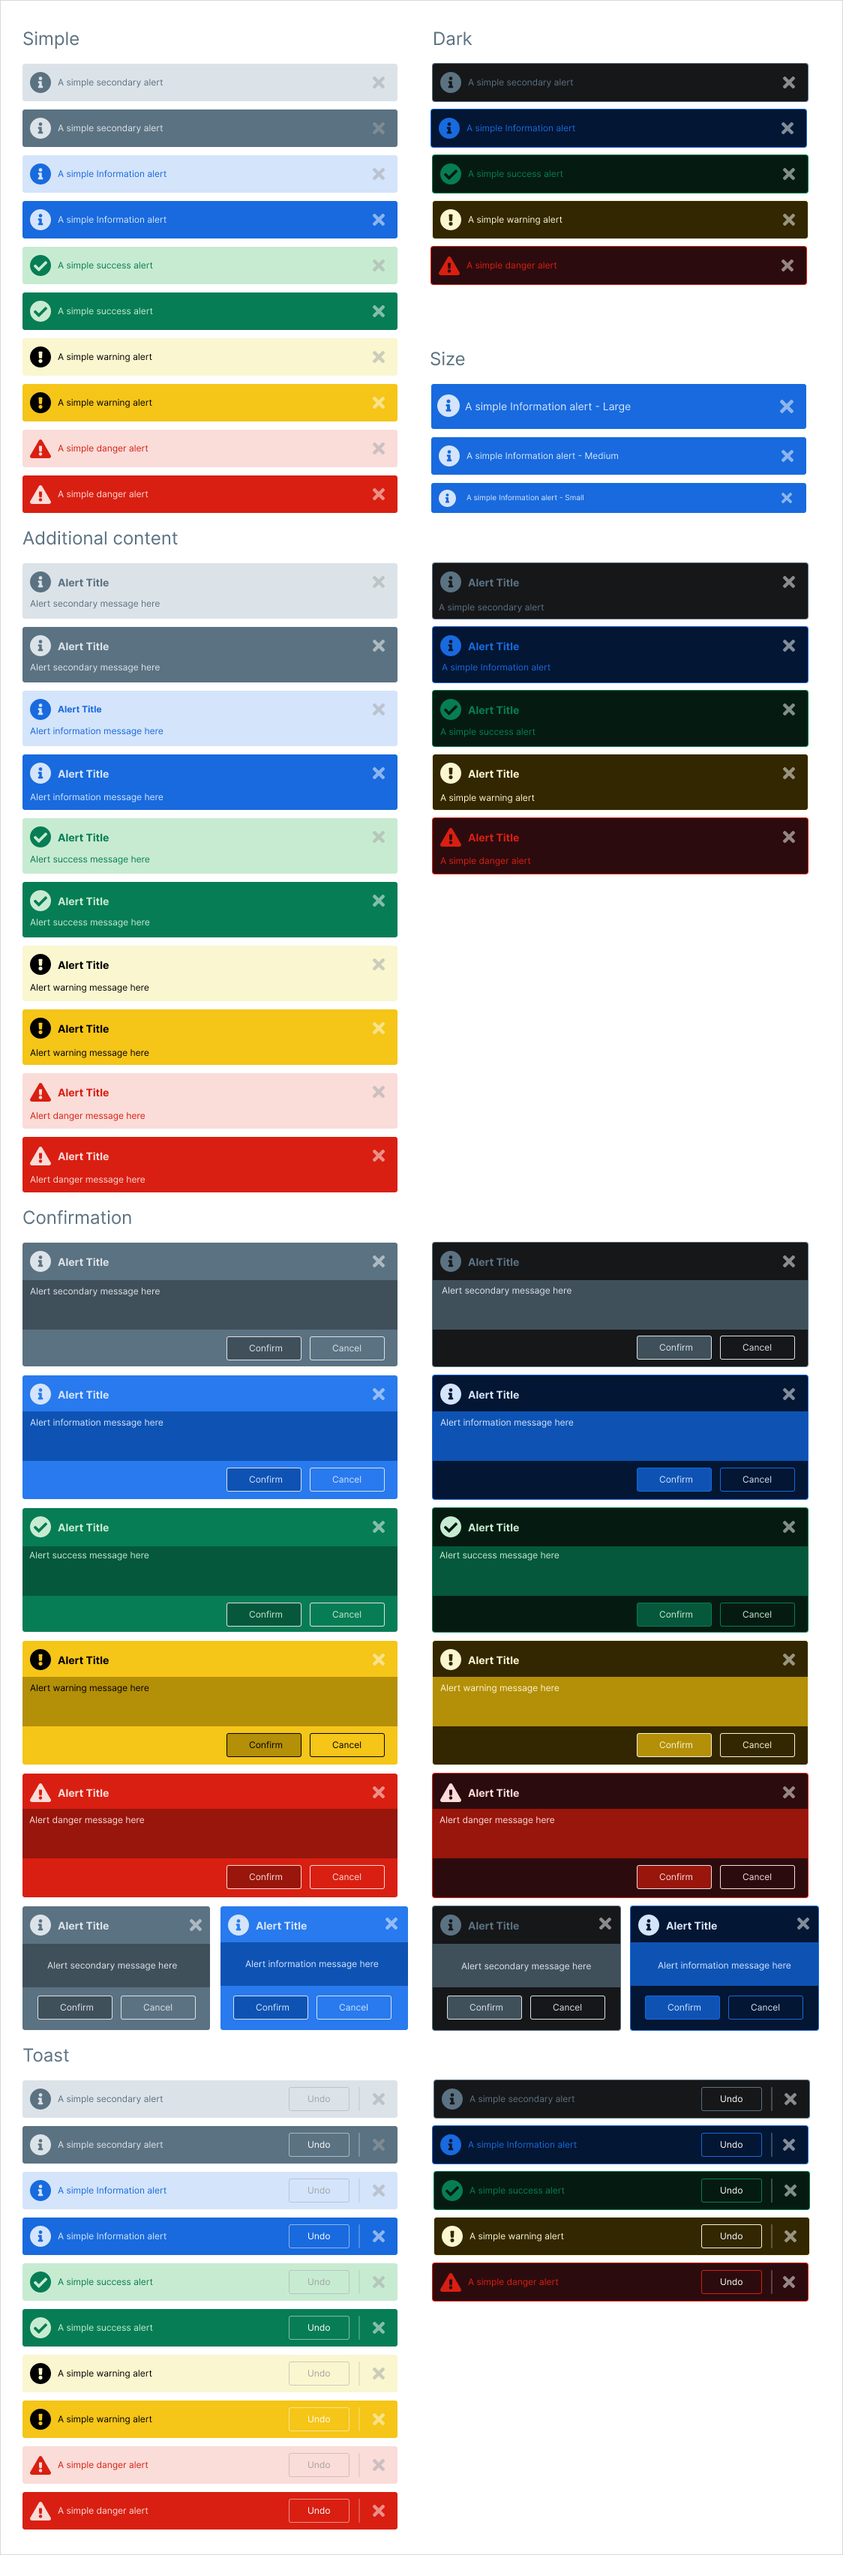
<style>
.page{position:relative;width:843px;height:2555px;background:#ffffff}
.page>*{position:absolute;margin:0}
.t1{font:18px "Inter-Regular";color:#5b7282}
.t2{font:9px "Inter-Regular";color:#5b7282}
.t3{font:9px "Inter-Regular";color:#dce3e8}
.t4{font:9px "Inter-Regular";color:#186ade}
.t5{font:9px "Inter-Regular";color:#077d55}
.t6{font:9px "Inter-Regular";color:#d4e4fa}
.t7{font:9px "Inter-Regular";color:#faf6cf}
.t8{font:9px "Inter-Regular";color:#d91f11}
.t9{font:9px "Inter-Regular";color:#c7ebd1}
.t10{font:9px "Inter-Regular";color:#000000}
.t11{font:10.5px "Inter-Regular";color:#d4e4fa}
.t12{font:9px "Inter-Regular";color:#fadcd9}
.t13{font:7.5px "Inter-Regular";color:#d4e4fa}
.t14{font:10.5px "Inter-Bold";color:#5b7282}
.t15{font:10.5px "Inter-Bold";color:#dce3e8}
.t16{font:10.5px "Inter-Bold";color:#186ade}
.t17{font:9px "Inter-Bold";color:#186ade}
.t18{font:10.5px "Inter-Bold";color:#077d55}
.t19{font:10.5px "Inter-Bold";color:#d4e4fa}
.t20{font:10.5px "Inter-Bold";color:#faf6cf}
.t21{font:10.5px "Inter-Bold";color:#d91f11}
.t22{font:10.5px "Inter-Bold";color:#c7ebd1}
.t23{font:10.5px "Inter-Bold";color:#000000}
.t24{font:10.5px "Inter-Bold";color:#fadcd9}
.t25{font:9px "Inter-Regular";color:#a2a3a5}
.t26{font:9px "Inter-Regular";color:#ffffff}
</style>
<div class="page">
<p class="t1" style="left:23px;top:32px;width:56px;height:17px">Simple</p>
<p class="t1" style="left:434px;top:32px;width:38px;height:14px">Dark</p>
<p class="t2" style="left:58px;top:79px;width:106px;height:9px">A simple secondary alert</p>
<p class="t2" style="left:468px;top:79px;width:106px;height:9px">A simple secondary alert</p>
<p class="t3" style="left:58px;top:124px;width:106px;height:10px">A simple secondary alert</p>
<p class="t4" style="left:466px;top:124px;width:109px;height:10px">A simple Information alert</p>
<p class="t4" style="left:58px;top:170px;width:108px;height:9px">A simple Information alert</p>
<p class="t5" style="left:468px;top:170px;width:95px;height:9px">A simple success alert</p>
<p class="t6" style="left:58px;top:215px;width:108px;height:10px">A simple Information alert</p>
<p class="t7" style="left:468px;top:216px;width:94px;height:9px">A simple warning alert</p>
<p class="t5" style="left:58px;top:262px;width:95px;height:9px">A simple success alert</p>
<p class="t8" style="left:466px;top:262px;width:91px;height:9px">A simple danger alert</p>
<p class="t9" style="left:58px;top:308px;width:95px;height:8px">A simple success alert</p>
<p class="t10" style="left:58px;top:353px;width:94px;height:9px">A simple warning alert</p>
<p class="t1" style="left:430px;top:352px;width:35px;height:14px">Size</p>
<p class="t10" style="left:58px;top:399px;width:94px;height:9px">A simple warning alert</p>
<p class="t11" style="left:465px;top:402px;width:166px;height:11px">A simple Information alert - Large</p>
<p class="t8" style="left:58px;top:445px;width:90px;height:9px">A simple danger alert</p>
<p class="t6" style="left:466px;top:452px;width:152px;height:9px">A simple Information alert - Medium</p>
<p class="t12" style="left:58px;top:490px;width:90px;height:10px">A simple danger alert</p>
<p class="t13" style="left:466px;top:494px;width:118px;height:8px">A simple Information alert - Small</p>
<p class="t1" style="left:22px;top:531px;width:156px;height:14px">Additional content</p>
<p class="t14" style="left:58px;top:578px;width:51px;height:9px">Alert Title</p>
<p class="t14" style="left:468px;top:578px;width:51px;height:9px">Alert Title</p>
<p class="t2" style="left:30px;top:600px;width:130px;height:9px">Alert secondary message here</p>
<p class="t2" style="left:439px;top:604px;width:105px;height:9px">A simple secondary alert</p>
<p class="t15" style="left:58px;top:642px;width:51px;height:9px">Alert Title</p>
<p class="t16" style="left:468px;top:642px;width:51px;height:9px">Alert Title</p>
<p class="t3" style="left:30px;top:664px;width:130px;height:9px">Alert secondary message here</p>
<p class="t4" style="left:442px;top:663px;width:108px;height:10px">A simple Information alert</p>
<p class="t17" style="left:58px;top:705px;width:44px;height:8px">Alert Title</p>
<p class="t18" style="left:468px;top:706px;width:51px;height:9px">Alert Title</p>
<p class="t4" style="left:30px;top:727px;width:134px;height:9px">Alert information message here</p>
<p class="t5" style="left:440px;top:728px;width:96px;height:9px">A simple success alert</p>
<p class="t19" style="left:58px;top:770px;width:51px;height:8px">Alert Title</p>
<p class="t20" style="left:468px;top:770px;width:51px;height:8px">Alert Title</p>
<p class="t6" style="left:30px;top:793px;width:134px;height:9px">Alert information message here</p>
<p class="t7" style="left:440px;top:794px;width:95px;height:9px">A simple warning alert</p>
<p class="t18" style="left:58px;top:833px;width:51px;height:9px">Alert Title</p>
<p class="t21" style="left:468px;top:833px;width:51px;height:9px">Alert Title</p>
<p class="t5" style="left:30px;top:856px;width:120px;height:9px">Alert success message here</p>
<p class="t8" style="left:440px;top:857px;width:91px;height:9px">A simple danger alert</p>
<p class="t22" style="left:58px;top:897px;width:51px;height:9px">Alert Title</p>
<p class="t9" style="left:30px;top:919px;width:120px;height:9px">Alert success message here</p>
<p class="t23" style="left:58px;top:961px;width:51px;height:9px">Alert Title</p>
<p class="t10" style="left:30px;top:984px;width:119px;height:9px">Alert warning message here</p>
<p class="t23" style="left:58px;top:1024px;width:51px;height:10px">Alert Title</p>
<p class="t10" style="left:30px;top:1049px;width:119px;height:9px">Alert warning message here</p>
<p class="t21" style="left:58px;top:1088px;width:51px;height:9px">Alert Title</p>
<p class="t8" style="left:30px;top:1112px;width:116px;height:9px">Alert danger message here</p>
<p class="t24" style="left:58px;top:1152px;width:51px;height:9px">Alert Title</p>
<p class="t12" style="left:30px;top:1176px;width:116px;height:9px">Alert danger message here</p>
<p class="t1" style="left:23px;top:1210px;width:108px;height:15px">Confirmation</p>
<p class="t15" style="left:58px;top:1258px;width:51px;height:9px">Alert Title</p>
<p class="t14" style="left:468px;top:1258px;width:51px;height:9px">Alert Title</p>
<p class="t3" style="left:30px;top:1288px;width:130px;height:9px">Alert secondary message here</p>
<p class="t3" style="left:442px;top:1287px;width:130px;height:9px">Alert secondary message here</p>
<p class="t3" style="left:249px;top:1344px;width:34px;height:8px">Confirm</p>
<p class="t3" style="left:332px;top:1345px;width:30px;height:7px">Cancel</p>
<p class="t3" style="left:659px;top:1343px;width:34px;height:9px">Confirm</p>
<p class="t3" style="left:742px;top:1344px;width:30px;height:8px">Cancel</p>
<p class="t19" style="left:58px;top:1390px;width:51px;height:10px">Alert Title</p>
<p class="t19" style="left:468px;top:1390px;width:51px;height:10px">Alert Title</p>
<p class="t6" style="left:30px;top:1418px;width:134px;height:10px">Alert information message here</p>
<p class="t6" style="left:440px;top:1418px;width:134px;height:10px">Alert information message here</p>
<p class="t6" style="left:249px;top:1475px;width:34px;height:9px">Confirm</p>
<p class="t6" style="left:332px;top:1476px;width:30px;height:8px">Cancel</p>
<p class="t6" style="left:659px;top:1475px;width:34px;height:9px">Confirm</p>
<p class="t6" style="left:742px;top:1476px;width:30px;height:8px">Cancel</p>
<p class="t22" style="left:58px;top:1523px;width:51px;height:9px">Alert Title</p>
<p class="t22" style="left:468px;top:1523px;width:51px;height:9px">Alert Title</p>
<p class="t9" style="left:29px;top:1552px;width:120px;height:9px">Alert success message here</p>
<p class="t9" style="left:440px;top:1552px;width:120px;height:9px">Alert success message here</p>
<p class="t9" style="left:249px;top:1610px;width:34px;height:8px">Confirm</p>
<p class="t9" style="left:332px;top:1611px;width:30px;height:7px">Cancel</p>
<p class="t9" style="left:659px;top:1610px;width:34px;height:8px">Confirm</p>
<p class="t9" style="left:742px;top:1611px;width:30px;height:7px">Cancel</p>
<p class="t23" style="left:58px;top:1656px;width:51px;height:9px">Alert Title</p>
<p class="t20" style="left:468px;top:1656px;width:51px;height:9px">Alert Title</p>
<p class="t10" style="left:30px;top:1684px;width:119px;height:10px">Alert warning message here</p>
<p class="t7" style="left:440px;top:1684px;width:120px;height:10px">Alert warning message here</p>
<p class="t10" style="left:249px;top:1741px;width:34px;height:8px">Confirm</p>
<p class="t10" style="left:332px;top:1742px;width:30px;height:7px">Cancel</p>
<p class="t7" style="left:659px;top:1741px;width:34px;height:8px">Confirm</p>
<p class="t7" style="left:742px;top:1742px;width:30px;height:7px">Cancel</p>
<p class="t24" style="left:58px;top:1789px;width:51px;height:9px">Alert Title</p>
<p class="t24" style="left:468px;top:1789px;width:51px;height:9px">Alert Title</p>
<p class="t12" style="left:29px;top:1816px;width:116px;height:10px">Alert danger message here</p>
<p class="t12" style="left:440px;top:1816px;width:115px;height:10px">Alert danger message here</p>
<p class="t12" style="left:249px;top:1873px;width:34px;height:8px">Confirm</p>
<p class="t12" style="left:332px;top:1874px;width:30px;height:7px">Cancel</p>
<p class="t12" style="left:659px;top:1873px;width:34px;height:8px">Confirm</p>
<p class="t12" style="left:742px;top:1874px;width:30px;height:7px">Cancel</p>
<p class="t15" style="left:58px;top:1922px;width:51px;height:8px">Alert Title</p>
<p class="t19" style="left:256px;top:1922px;width:51px;height:8px">Alert Title</p>
<p class="t14" style="left:468px;top:1922px;width:51px;height:8px">Alert Title</p>
<p class="t19" style="left:666px;top:1922px;width:51px;height:8px">Alert Title</p>
<p class="t6" style="left:245px;top:1960px;width:134px;height:10px">Alert information message here</p>
<p class="t6" style="left:658px;top:1961px;width:133px;height:10px">Alert information message here</p>
<p class="t3" style="left:47px;top:1962px;width:130px;height:9px">Alert secondary message here</p>
<p class="t3" style="left:461px;top:1963px;width:130px;height:9px">Alert secondary message here</p>
<p class="t3" style="left:60px;top:2003px;width:34px;height:9px">Confirm</p>
<p class="t3" style="left:143px;top:2004px;width:29px;height:8px">Cancel</p>
<p class="t6" style="left:256px;top:2003px;width:34px;height:9px">Confirm</p>
<p class="t6" style="left:339px;top:2004px;width:29px;height:8px">Cancel</p>
<p class="t3" style="left:470px;top:2003px;width:33px;height:9px">Confirm</p>
<p class="t3" style="left:553px;top:2004px;width:29px;height:8px">Cancel</p>
<p class="t6" style="left:668px;top:2003px;width:33px;height:9px">Confirm</p>
<p class="t6" style="left:751px;top:2004px;width:29px;height:8px">Cancel</p>
<p class="t1" style="left:23px;top:2048px;width:46px;height:14px">Toast</p>
<p class="t2" style="left:58px;top:2096px;width:106px;height:8px">A simple secondary alert</p>
<p class="t25" style="left:308px;top:2096px;width:22px;height:7px">Undo</p>
<p class="t2" style="left:470px;top:2096px;width:105px;height:8px">A simple secondary alert</p>
<p class="t26" style="left:721px;top:2096px;width:21px;height:7px">Undo</p>
<p class="t3" style="left:58px;top:2141px;width:106px;height:9px">A simple secondary alert</p>
<p class="t26" style="left:308px;top:2141px;width:22px;height:8px">Undo</p>
<p class="t4" style="left:468px;top:2140px;width:109px;height:10px">A simple Information alert</p>
<p class="t26" style="left:721px;top:2141px;width:21px;height:8px">Undo</p>
<p class="t4" style="left:58px;top:2186px;width:108px;height:10px">A simple Information alert</p>
<p class="t25" style="left:308px;top:2187px;width:22px;height:7px">Undo</p>
<p class="t5" style="left:470px;top:2187px;width:95px;height:9px">A simple success alert</p>
<p class="t26" style="left:721px;top:2187px;width:21px;height:7px">Undo</p>
<p class="t6" style="left:58px;top:2232px;width:108px;height:10px">A simple Information alert</p>
<p class="t26" style="left:308px;top:2233px;width:22px;height:7px">Undo</p>
<p class="t7" style="left:470px;top:2233px;width:94px;height:9px">A simple warning alert</p>
<p class="t26" style="left:721px;top:2233px;width:21px;height:7px">Undo</p>
<p class="t5" style="left:58px;top:2278px;width:95px;height:10px">A simple success alert</p>
<p class="t25" style="left:308px;top:2278px;width:22px;height:8px">Undo</p>
<p class="t8" style="left:468px;top:2278px;width:91px;height:10px">A simple danger alert</p>
<p class="t26" style="left:721px;top:2278px;width:21px;height:8px">Undo</p>
<p class="t9" style="left:58px;top:2324px;width:95px;height:9px">A simple success alert</p>
<p class="t26" style="left:308px;top:2324px;width:22px;height:8px">Undo</p>
<p class="t10" style="left:58px;top:2370px;width:94px;height:9px">A simple warning alert</p>
<p class="t25" style="left:308px;top:2370px;width:22px;height:8px">Undo</p>
<p class="t10" style="left:58px;top:2416px;width:94px;height:9px">A simple warning alert</p>
<p class="t26" style="left:308px;top:2416px;width:22px;height:7px">Undo</p>
<p class="t8" style="left:58px;top:2462px;width:90px;height:8px">A simple danger alert</p>
<p class="t25" style="left:308px;top:2462px;width:22px;height:7px">Undo</p>
<p class="t12" style="left:58px;top:2507px;width:90px;height:9px">A simple danger alert</p>
<p class="t26" style="left:308px;top:2507px;width:22px;height:8px">Undo</p>
</div>
